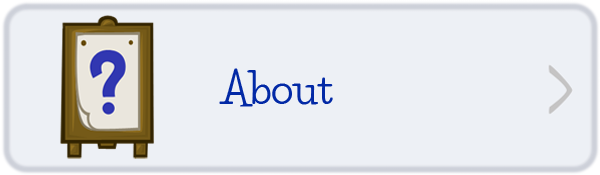
<style>
.page{position:relative;width:600px;height:175px;background:#edf0f5}
.page>*{position:absolute;margin:0}
.t1{font:41.6px "LifeSavers-Bold";color:#0229a6}
</style>
<div class="page">
<p class="t1" style="left:219px;top:68px;width:114px;height:39px">About</p>
</div>
